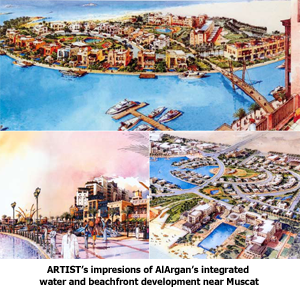
<style>
.page{position:relative;width:300px;height:290px}
.page>*{position:absolute;margin:0}
.t1{font:9.5px/12px "Tahoma-Bold";letter-spacing:0.005em;color:#000000;scale:0.95 1}
</style>
<div class="page">
<p class="t1" style="left:39px;top:265px;width:220px;height:22px;text-align:center">ARTIST’s impresions of AlArgan’s integrated <br>water and beachfront development near Muscat</p>
</div>
